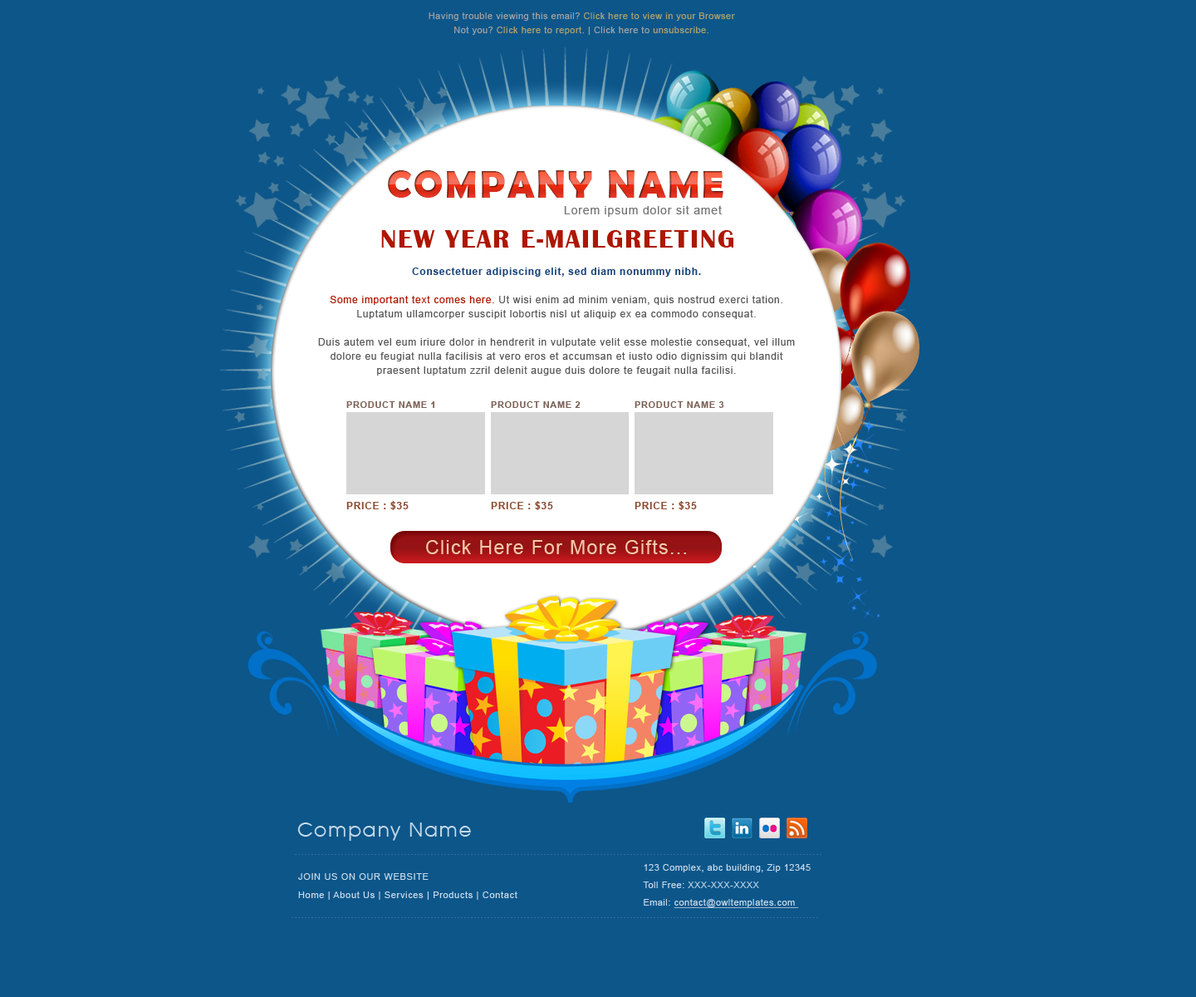
<style>
.page{position:relative;width:1196px;height:997px;background:#0d568a}
.page>*{position:absolute;margin:0}
.t1{font:8.9px/14.4px "ArialMT";letter-spacing:0.06em;color:#a1a1a1}
.t2{font:8.9px/14.4px "ArialMT";letter-spacing:0.06em;color:#aca16d}
.t3{font:39px "BerlinSansFBDemi-Bold";letter-spacing:0.06em;text-transform:uppercase}
.t4{font:11.6px "ArialMT";letter-spacing:0.06em;color:#747474}
.t5{font:26.6px "BritannicBold";letter-spacing:0.06em;color:#ae1601;text-transform:uppercase}
.t6{font:10px/14.1px "ArialMT";letter-spacing:0.06em;color:#575757}
.t7{font:10px/14.1px "Arial-BoldMT";letter-spacing:0.06em;color:#1d467a}
.t8{font:10px/14.1px "ArialMT";letter-spacing:0.06em;color:#ae1601}
.t9{font:9.1px "Arial-BoldMT";letter-spacing:0.06em;color:#7b6156;text-transform:uppercase}
.t10{font:10px "Arial-BoldMT";letter-spacing:0.06em;color:#8d4d33;text-transform:uppercase}
.t11{font:19.1px "ArialMT";letter-spacing:0.06em}
.t12{font:19.1px "ArialMT";letter-spacing:0.06em;color:#ffc5ae}
.t13{font:21.6px "AvantGarGotItcTEE-Book";letter-spacing:0.06em;color:#c5d9e8}
.t14{font:8.9px/8.9px "ArialMT";letter-spacing:0.06em;color:#c5d9e8}
.t15{font:8.9px/8.9px "ArialMT";letter-spacing:0.06em;color:#c5d9e8;text-decoration:underline}
.t16{font:9.1px/9.1px "ArialMT";letter-spacing:0.06em;color:#c5d9e8}
</style>
<div class="page">
<p class="t1" style="left:429px;top:12px;width:306px;height:23px;text-align:center">Having trouble viewing this email? <span class="t2">Click here to view in your Browser<br></span>Not you? <span class="t2">Click here to report</span>. | Click here to <span class="t2">unsubscribe</span>.</p>
<p class="t3" style="left:388px;top:170px;width:336px;height:29px">Company Name</p>
<p class="t4" style="left:564px;top:205px;width:158px;height:12px">Lorem ipsum dolor sit amet</p>
<p class="t5" style="left:381px;top:230px;width:353px;height:18px">New Year E-mailGreeting</p>
<p class="t6" style="left:318px;top:267px;width:477px;height:108px;text-align:center"><span class="t7">Consectetuer adipiscing elit, sed diam nonummy nibh.<br></span><span class="t8"><br>Some important text comes here. </span>Ut wisi enim ad minim veniam, quis nostrud exerci tation.  Luptatum ullamcorper suscipit lobortis nisl ut aliquip ex ea commodo consequat. <br><br>Duis autem vel eum iriure dolor in hendrerit in vulputate velit esse molestie consequat, vel illum dolore eu feugiat nulla facilisis at vero eros et accumsan et iusto odio dignissim qui blandit praesent luptatum zzril delenit augue duis dolore te feugait nulla facilisi.</p>
<p class="t9" style="left:346px;top:401px;width:88px;height:7px">Product Name 1</p>
<p class="t9" style="left:491px;top:401px;width:90px;height:7px">Product Name 2</p>
<p class="t9" style="left:635px;top:401px;width:89px;height:7px">Product Name 3</p>
<p class="t10" style="left:346px;top:501px;width:63px;height:9px">Price : $35</p>
<p class="t10" style="left:491px;top:501px;width:62px;height:9px">Price : $35</p>
<p class="t10" style="left:635px;top:501px;width:62px;height:9px">Price : $35</p>
<p class="t11" style="left:426px;top:539px;width:260px;height:14px">Click Here For More Gifts...</p>
<p class="t12" style="left:426px;top:540px;width:260px;height:14px">Click Here For More Gifts...</p>
<p class="t13" style="left:297px;top:822px;width:174px;height:19px">Company Name</p>
<p class="t14" style="left:643px;top:864px;width:168px;height:44px">123 Complex, abc building, Zip 12345<br><br>Toll Free: XXX-XXX-XXXX<br><br>Email: <span class="t15">contact@owltemplates.com</span></p>
<p class="t16" style="left:298px;top:873px;width:220px;height:27px">JOIN US ON OUR WEBSITE <br><br>Home | About Us | Services | Products | Contact</p>
</div>
